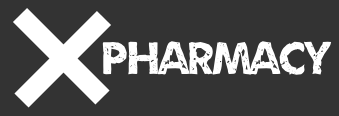
<style>
.page{position:relative;width:339px;height:116px;background:#333333}
.page>*{position:absolute;margin:0}
.t1{font:51px "Umbrage";color:#ffffff}
</style>
<div class="page">
<p class="t1" style="left:102px;top:41px;width:230px;height:34px">pharmacy</p>
</div>
